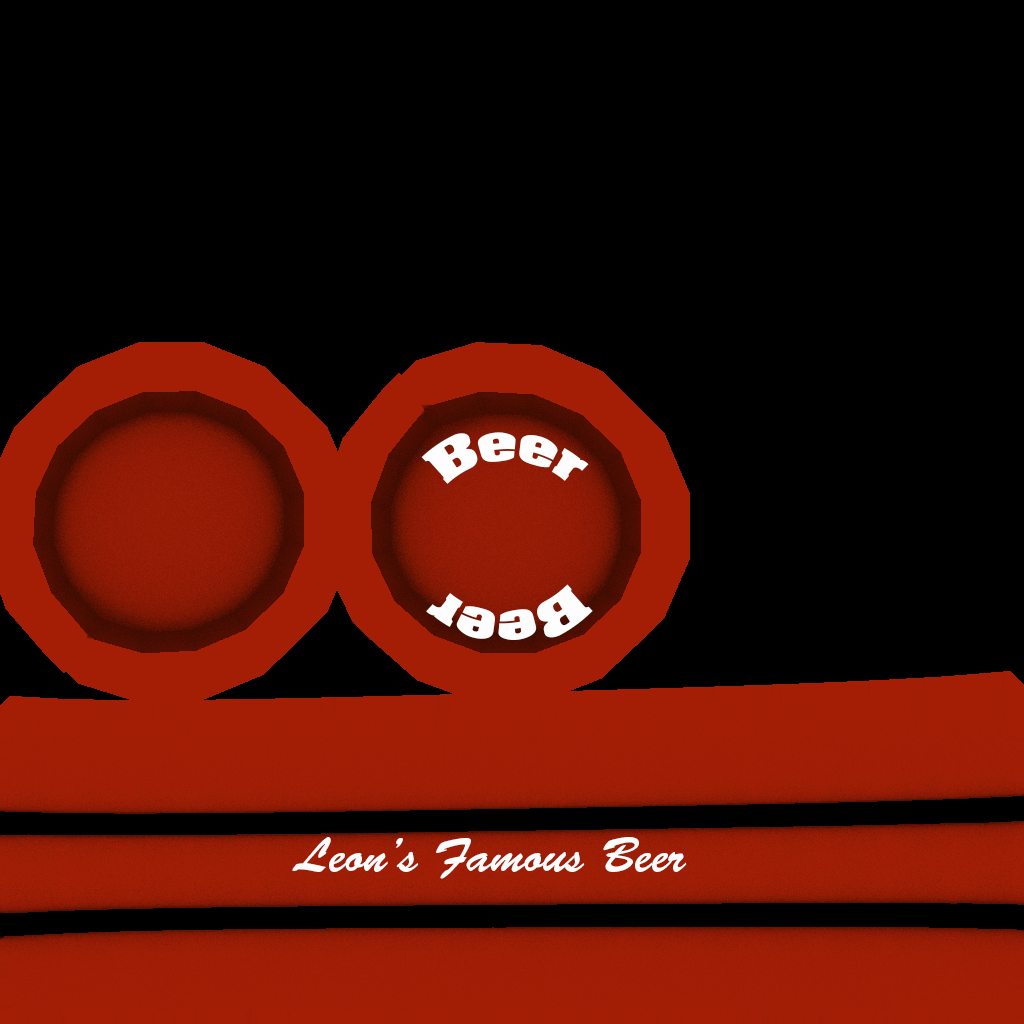
<style>
.page{position:relative;width:1024px;height:1024px;background:#000000}
.page>*{position:absolute;margin:0}
.t1{font:48px "AcmeFont";color:#fdfdfd}
.t2{font:49.6px "AcmeFont";color:#fdfdfd;scale:0.97 1}
.t3{font:48px "BrushScriptStd";color:#fdfdfd}
</style>
<div class="page">
<p class="t1" style="left:421px;top:432px;width:168px;height:52px">Beer</p>
<p class="t2" style="left:426px;top:584px;width:167px;height:56px;rotate:177deg">Beer</p>
<p class="t3" style="left:292px;top:837px;width:395px;height:42px">Leon’s Famous Beer</p>
</div>
